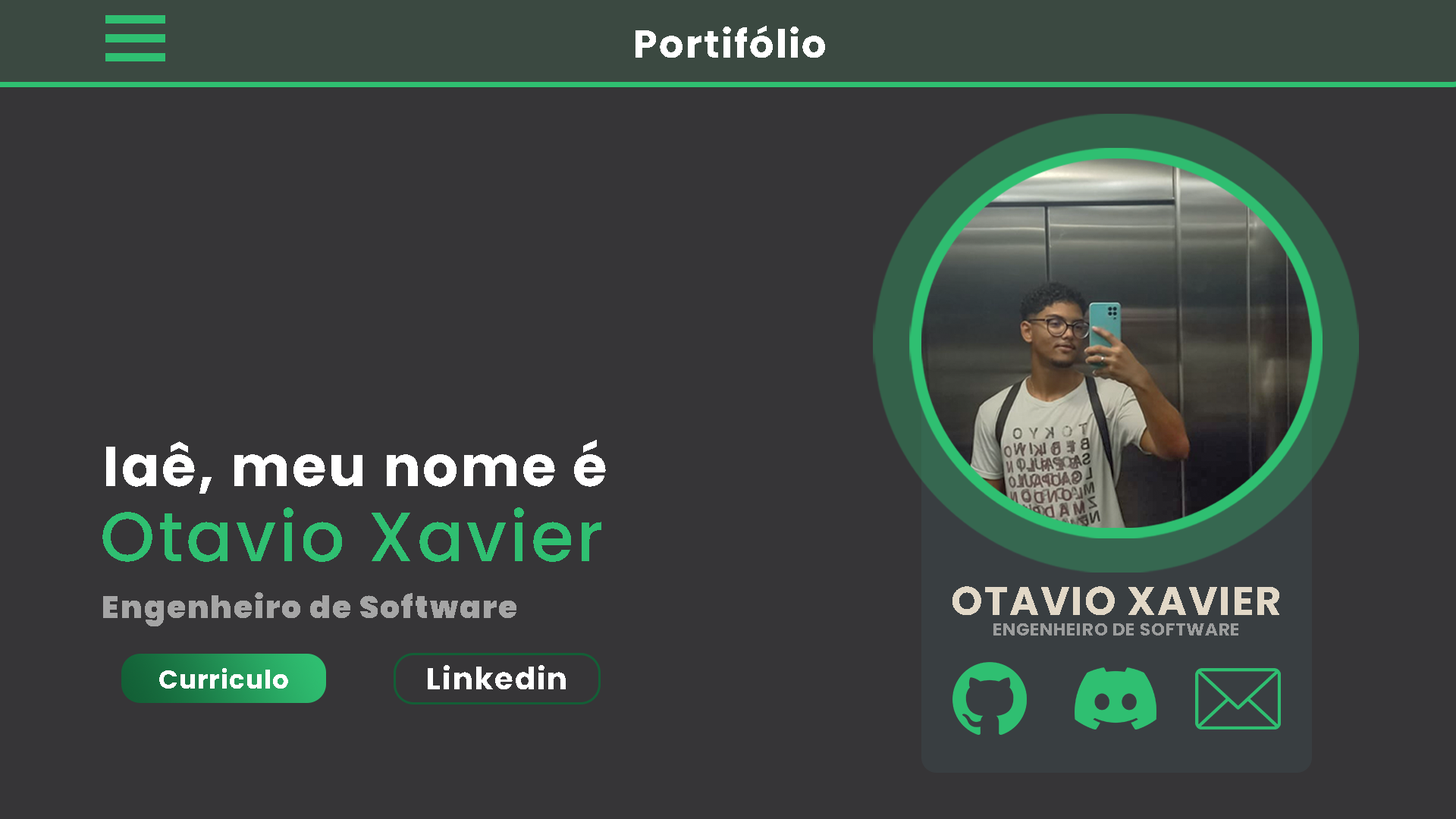
<style>
.page{position:relative;width:1456px;height:819px;background:#363537}
.page>*{position:absolute;margin:0}
.t1{font:38.9px "Poppins-Bold";letter-spacing:0.04em;color:#ffffff}
.t2{font:55.9px "Poppins-Bold";letter-spacing:0.04em;color:#ffffff}
.t3{font:69.6px "Poppins-Medium";letter-spacing:0.04em;color:#2fbf71}
.t4{font:31.5px "Poppins-Black";letter-spacing:0.04em;color:#a5a5a5}
.t5{font:39.9px "Poppins-Bold";letter-spacing:0.04em;color:#e2d8c7}
.t6{font:17.2px "Poppins-Bold";letter-spacing:0.04em;color:#9c9d9d}
.t7{font:30.6px "Poppins-Bold";letter-spacing:0.04em;color:#ffffff}
.t8{font:25.5px "Poppins-Bold";letter-spacing:0.04em;color:#ffffff}
</style>
<div class="page">
<p class="t1" style="left:635px;top:26px;width:190px;height:32px">Portifólio</p>
<p class="t2" style="left:106px;top:440px;width:500px;height:54px">Iaê, meu nome é</p>
<p class="t3" style="left:102px;top:507px;width:499px;height:55px">Otavio Xavier</p>
<p class="t4" style="left:103px;top:592px;width:413px;height:34px">Engenheiro de Software</p>
<p class="t5" style="left:952px;top:586px;width:327px;height:29px">OTAVIO XAVIER</p>
<p class="t6" style="left:993px;top:623px;width:245px;height:12px">ENGENHEIRO DE SOFTWARE</p>
<p class="t7" style="left:428px;top:665px;width:138px;height:24px">Linkedin</p>
<p class="t8" style="left:159px;top:668px;width:129px;height:21px">Curriculo</p>
</div>
